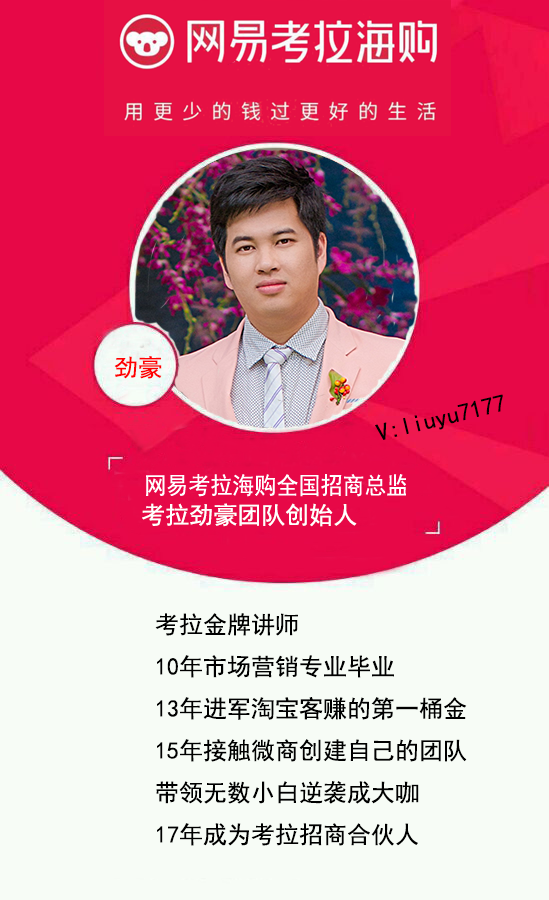
<style>
.page{position:relative;width:549px;height:900px;background:#f7fcf6}
.page>*{position:absolute;margin:0}
.t1{font:24px "SimHei";color:#ff0000}
.t2{font:24px "SimHei";color:#000000}
.t3{font:24px "SimHei";color:#ffffff}
</style>
<div class="page">
<p class="t1" style="left:114px;top:356px;width:48px;height:23px">劲豪</p>
<p class="t2" style="left:375px;top:394px;width:128px;height:46px;rotate:-14deg">V:liuyu7177</p>
<p class="t3" style="left:142px;top:503px;width:215px;height:24px">考拉劲豪团队创始人</p>
<p class="t2" style="left:155px;top:613px;width:312px;height:233px">考拉金牌讲师<br>10年市场营销专业毕业<br>13年进军淘宝客赚的第一桶金<br>15年接触微商创建自己的团队<br>带领无数小白逆袭成大咖<br>17年成为考拉招商合伙人</p>
</div>
